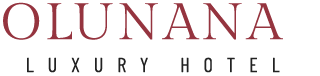
<style>
.page{position:relative;width:320px;height:76px;background:#ffffff}
.page>*{position:absolute;margin:0}
.t1{font:51px "GildaDisplay-Regular";letter-spacing:0.08em;color:#95343f}
.t2{font:20.2px "BarlowCondensed-Regular";letter-spacing:0.685em;color:#222222}
</style>
<div class="page">
<p class="t1" style="left:3px;top:2px;width:280px;height:38px">OLUNANA</p>
<p class="t2" style="left:27px;top:57px;width:253px;height:16px">LUXURY HOTEL</p>
</div>
